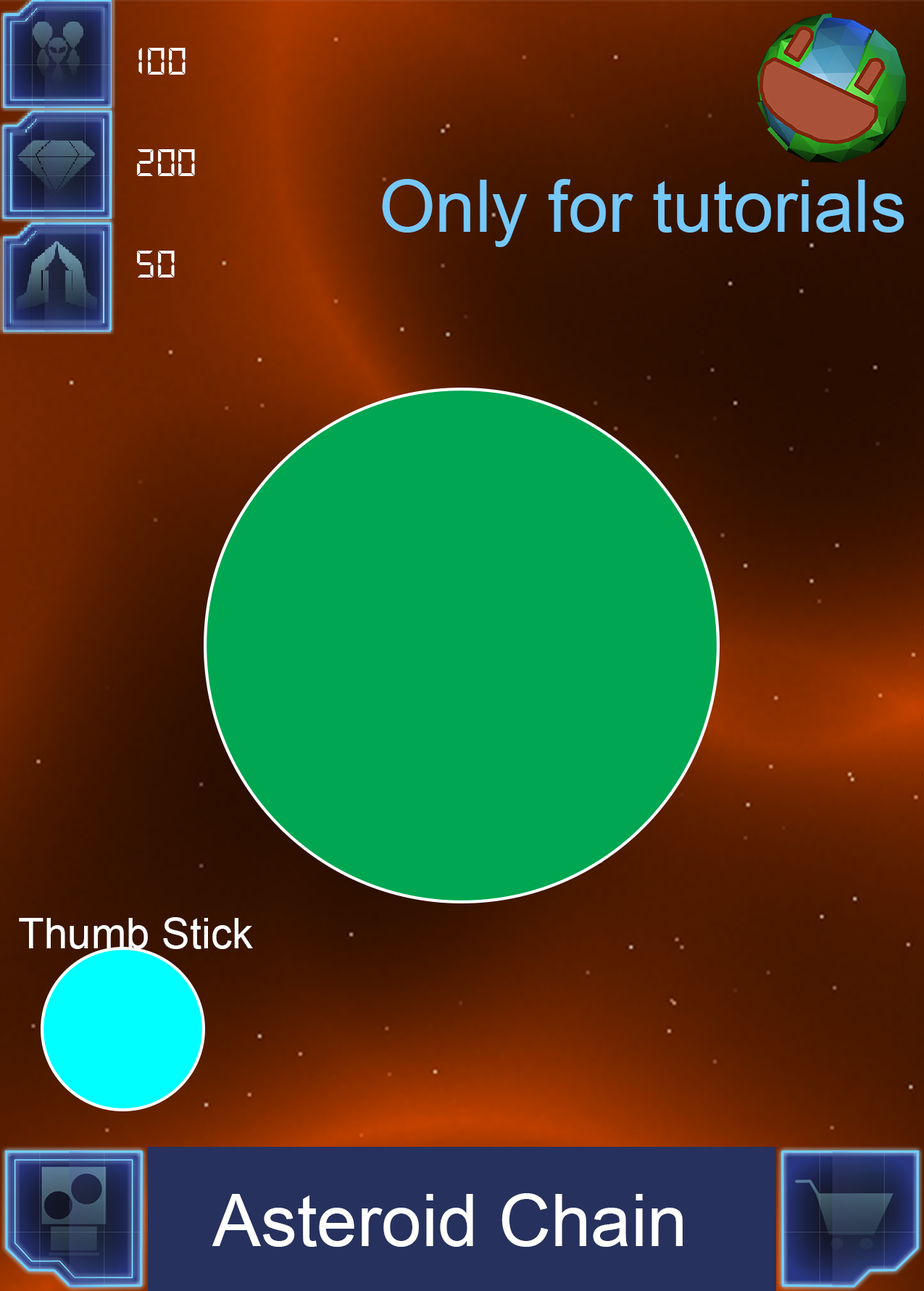
<style>
.page{position:relative;width:924px;height:1291px}
.page>*{position:absolute;margin:0}
.t1{font:42.3px "DS-Digital";color:#ffffff}
.t2{font:72.4px "ArialMT";color:#76c8f7}
.t3{font:42.3px "ArialMT";color:#ffffff}
.t4{font:72.4px "ArialMT";color:#ffffff}
</style>
<div class="page">
<p class="t1" style="left:137px;top:47px;width:58px;height:230px">100<br><br>200<br><br>50</p>
<p class="t2" style="left:382px;top:179px;width:522px;height:68px">Only for tutorials</p>
<p class="t3" style="left:19px;top:917px;width:234px;height:32px">Thumb Stick</p>
<p class="t4" style="left:212px;top:1193px;width:470px;height:54px">Asteroid Chain</p>
</div>
